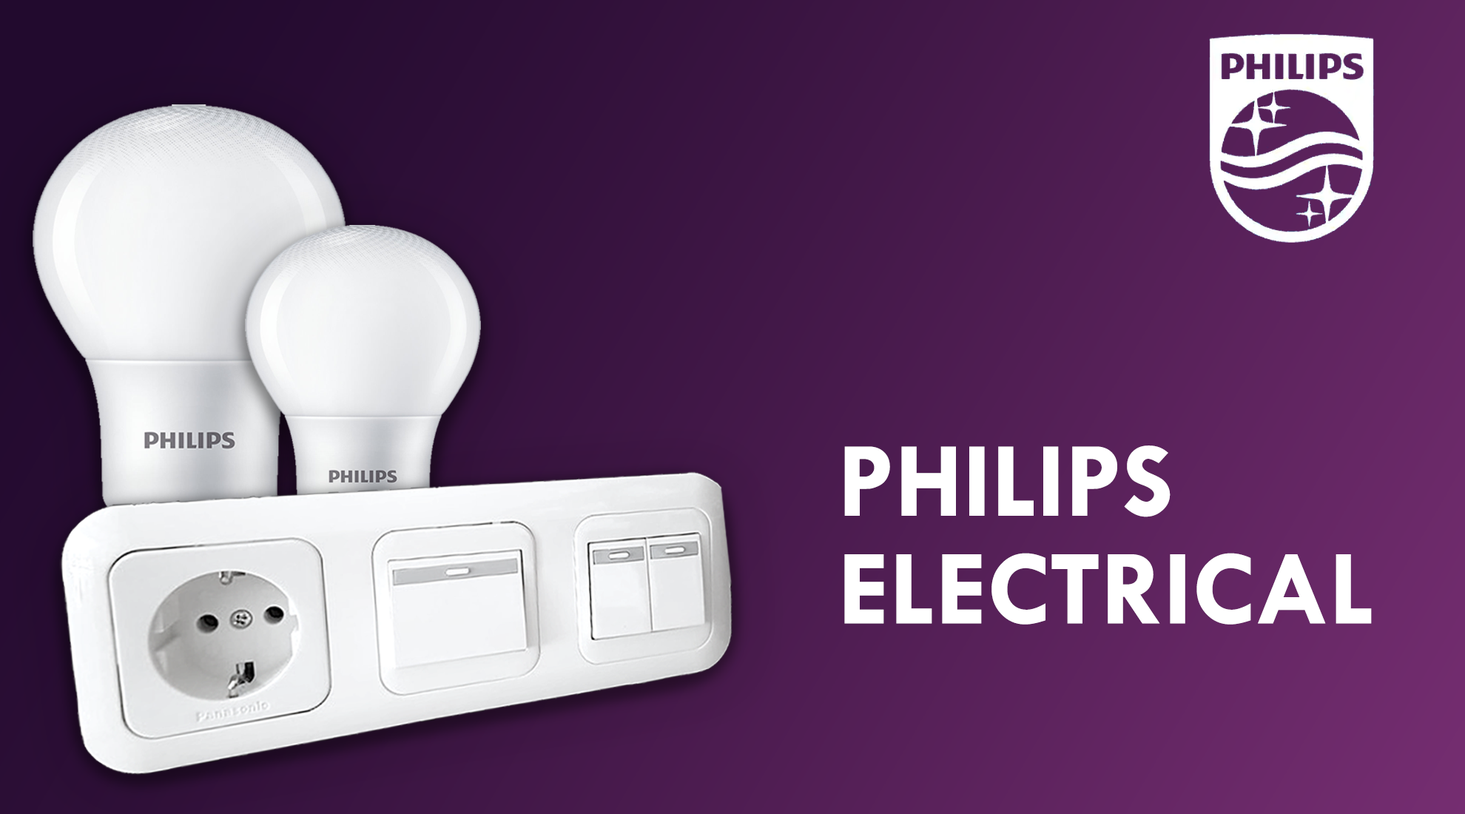
<style>
.page{position:relative;width:1465px;height:814px}
.page>*{position:absolute;margin:0}
.t1{font:107.7px/107.7px "TwCenMT-Bold";color:#ffffff;text-transform:uppercase}
</style>
<div class="page">
<p class="t1" style="left:844px;top:445px;width:528px;height:179px">Philips <br>electrical</p>
</div>
